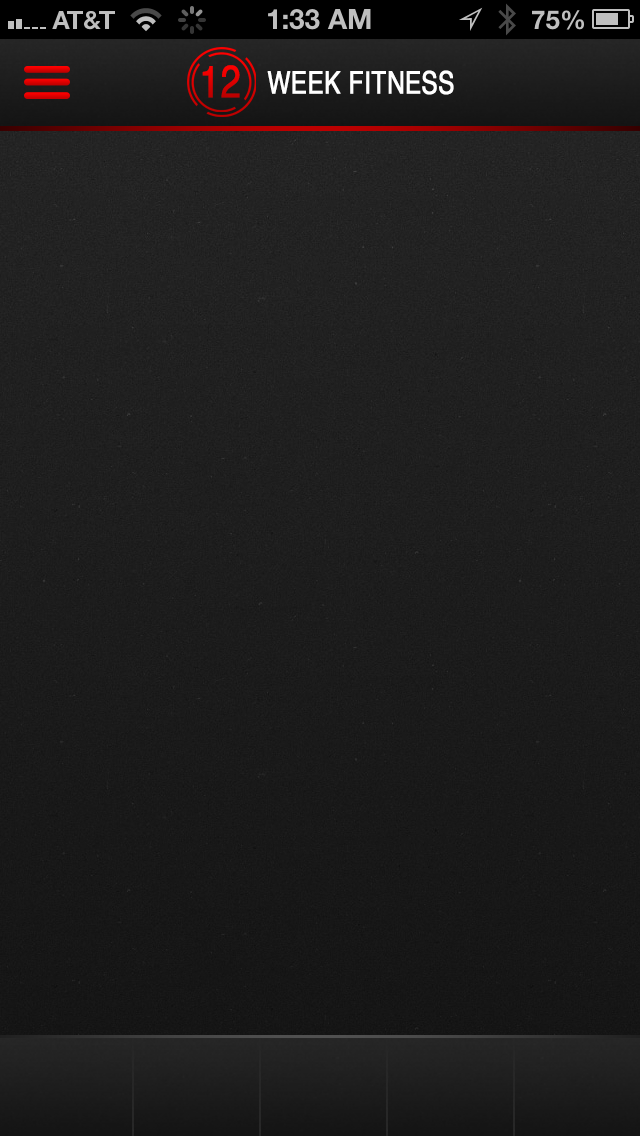
<style>
.page{position:relative;width:640px;height:1136px}
.page>*{position:absolute;margin:0}
.t1{font:45.1px "Helvetica";font-weight:bold;scale:0.8 1}
.t2{font:30.6px "Helvetica";color:#ffffff;font-weight:bold;scale:0.79 1}
</style>
<div class="page">
<p class="t1" style="left:202px;top:65px;width:38px;height:33px">12</p>
<p class="t2" style="left:267px;top:70px;width:187px;height:25px">WEEK FITNESS</p>
</div>
